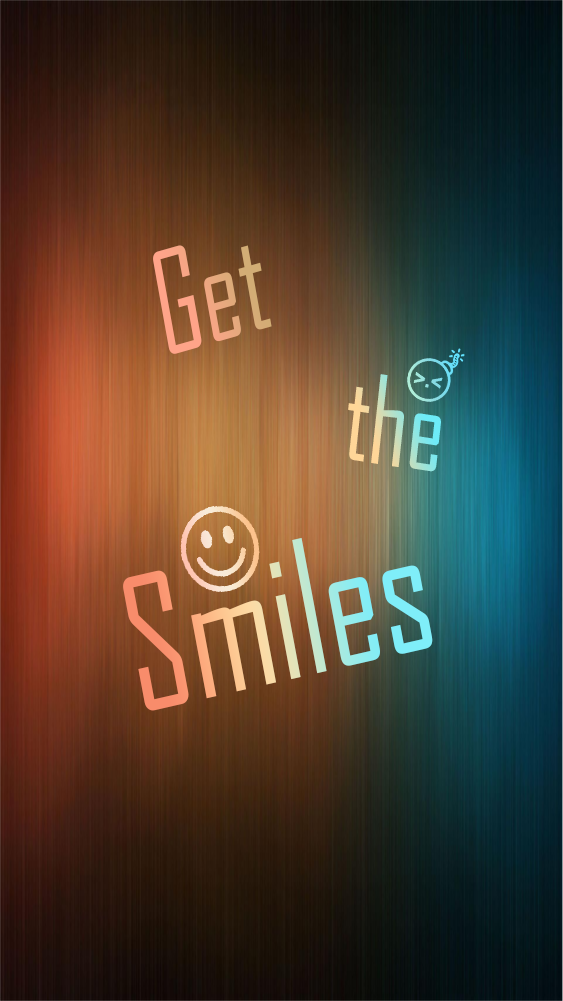
<style>
.page{position:relative;width:563px;height:1001px}
.page>*{position:absolute;margin:0}
.t1{font:135.6px "AgencyFB-Reg";color:#f5a684;scale:0.8 1}
.t2{font:116.5px "AgencyFB-Reg";scale:0.86 1}
.t3{font:177px "AgencyFB-Reg";scale:0.84 1}
</style>
<div class="page">
<p class="t1" style="left:153px;top:245px;width:119px;height:109px;rotate:-16deg">Get</p>
<p class="t2" style="left:348px;top:374px;width:93px;height:98px;rotate:9deg">the</p>
<p class="t3" style="left:123px;top:537px;width:310px;height:174px;rotate:-13deg">Smiles</p>
</div>
